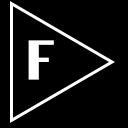
<style>
.page{position:relative;width:128px;height:128px;background:#000000}
.page>*{position:absolute;margin:0}
.t1{font:52.2px "Krungthep";letter-spacing:-0.02em;color:#ffffff;scale:1.15 1}
</style>
<div class="page">
<p class="t1" style="left:28px;top:40px;width:26px;height:40px">F</p>
</div>
